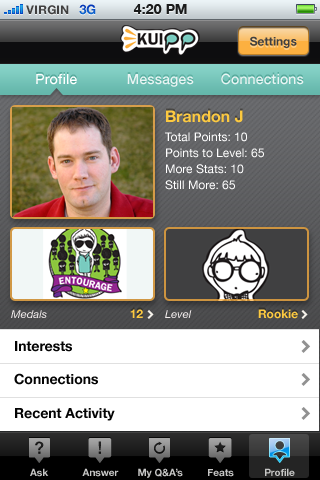
<style>
.page{position:relative;width:320px;height:480px}
.page>*{position:absolute;margin:0}
.t1{font:12px "HelveticaNeue-Bold";color:#404040;text-transform:uppercase}
.t2{font:13px "HelveticaNeue-Bold";color:#0c54c5;text-transform:uppercase}
.t3{font:14px "HelveticaNeue-Bold";color:#1a1b1b;text-transform:uppercase}
.t4{font:12px "HelveticaNeue-Bold";color:#404041}
.t5{font:14px "HelveticaNeue-Medium";letter-spacing:0.01em;color:#ffffff}
.t6{font:14px "HelveticaNeue-Medium";letter-spacing:0.01em;color:#e9f4f3}
.t7{font:16px "HelveticaNeue-Bold";color:#fcc940}
.t8{font:12px/16px "HelveticaNeue";color:#ffffff}
.t9{font:11px "HelveticaNeue-Italic";letter-spacing:0.01em;color:#f6f0f0}
.t10{font:12px "HelveticaNeue-Bold";color:#fcc940}
.t11{font:14px "HelveticaNeue-Bold";color:#040404}
.t12{font:10px "HelveticaNeue-Bold";color:#c6c6c5}
</style>
<div class="page">
<p class="t1" style="left:26px;top:5px;width:43px;height:10px">VIRGIN</p>
<p class="t2" style="left:79px;top:4px;width:17px;height:11px">3G</p>
<p class="t3" style="left:133px;top:4px;width:54px;height:10px">4:20 PM</p>
<p class="t4" style="left:250px;top:36px;width:47px;height:12px">Settings</p>
<p class="t5" style="left:36px;top:74px;width:41px;height:11px">Profile</p>
<p class="t6" style="left:127px;top:74px;width:67px;height:13px">Messages</p>
<p class="t6" style="left:221px;top:73px;width:83px;height:12px">Connections</p>
<p class="t7" style="left:166px;top:110px;width:77px;height:13px">Brandon J</p>
<p class="t8" style="left:165px;top:132px;width:99px;height:58px">Total Points: 10<br>Points to Level: 65<br>More Stats: 10<br>Still More: 65</p>
<p class="t9" style="left:11px;top:310px;width:36px;height:8px">Medals</p>
<p class="t10" style="left:130px;top:309px;width:13px;height:9px">12</p>
<p class="t9" style="left:165px;top:310px;width:27px;height:8px">Level</p>
<p class="t10" style="left:258px;top:309px;width:40px;height:10px">Rookie</p>
<p class="t11" style="left:15px;top:341px;width:57px;height:11px">Interests</p>
<p class="t11" style="left:14px;top:373px;width:84px;height:12px">Connections</p>
<p class="t11" style="left:15px;top:408px;width:100px;height:13px">Recent Activity</p>
<p class="t12" style="left:30px;top:468px;width:19px;height:9px">Ask</p>
<p class="t12" style="left:82px;top:468px;width:37px;height:9px">Answer</p>
<p class="t12" style="left:138px;top:468px;width:45px;height:10px">My Q&amp;A’s</p>
<p class="t12" style="left:208px;top:469px;width:26px;height:8px">Feats</p>
<p class="t12" style="left:265px;top:468px;width:30px;height:8px">Profile</p>
</div>
